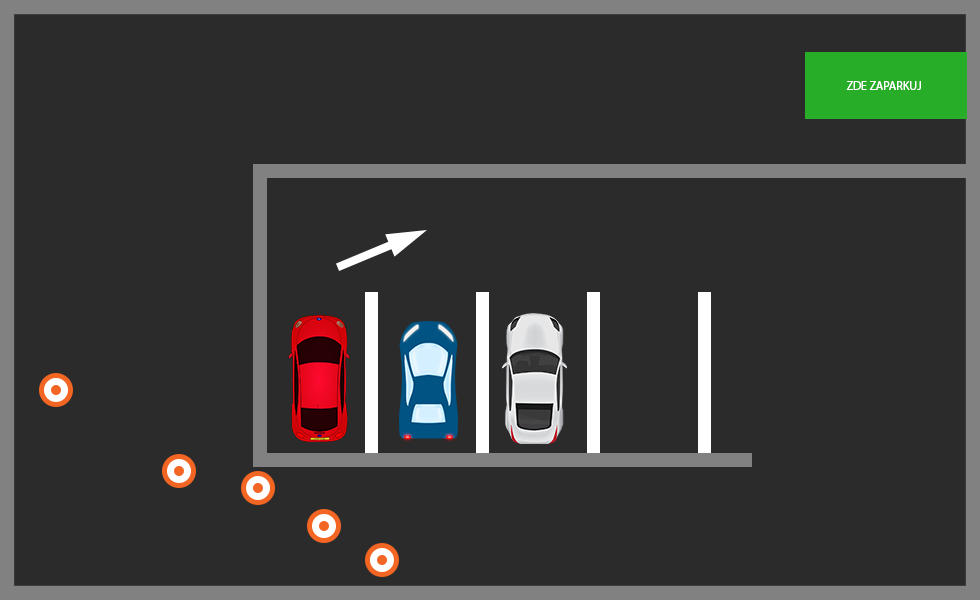
<style>
.page{position:relative;width:980px;height:600px;background:#2b2b2b}
.page>*{position:absolute;margin:0}
.t1{font:12px "MyriadPro-Regular";color:#ffffff}
</style>
<div class="page">
<p class="t1" style="left:846px;top:81px;width:75px;height:9px">ZDE ZAPARKUJ</p>
</div>
